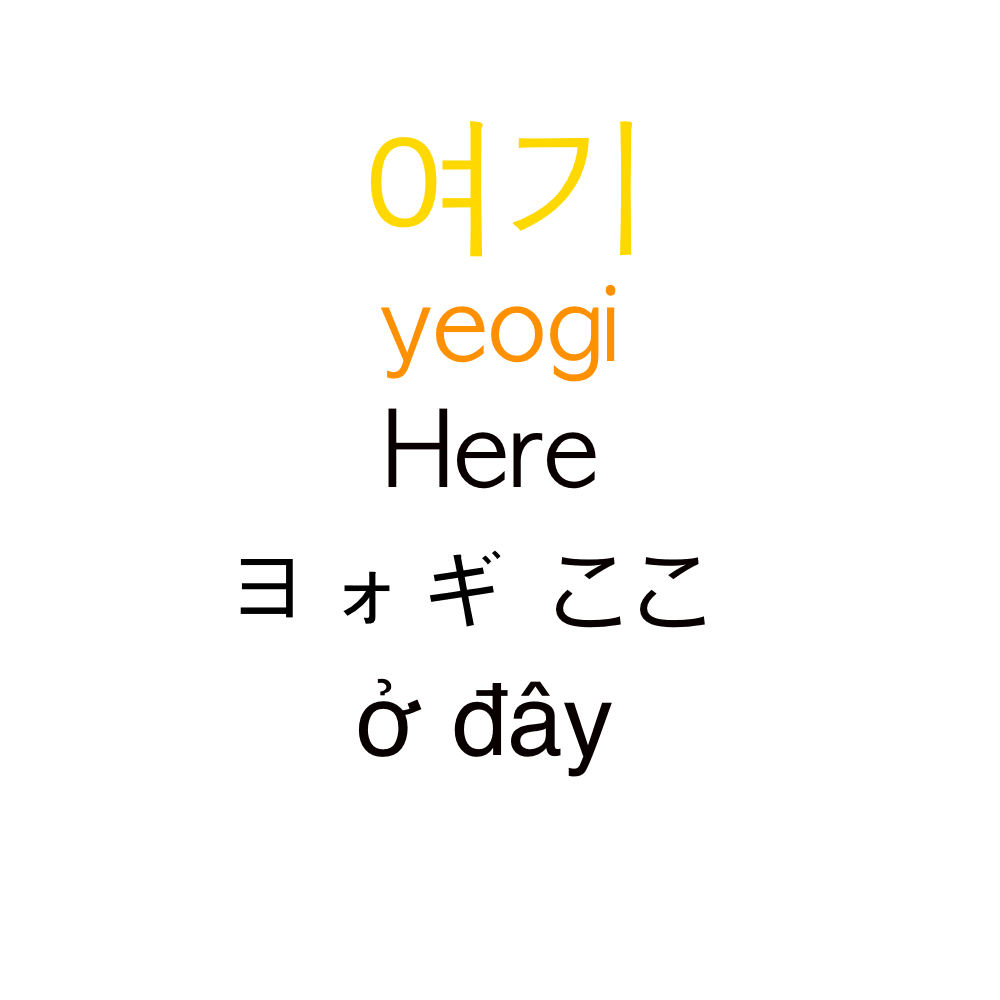
<style>
.page{position:relative;width:1000px;height:1000px;background:#ffffff}
.page>*{position:absolute;margin:0}
.t1{font:150px "AppleGothic";color:#ffd800}
.t2{font:100px "AppleGothic";color:#ff9000}
.t3{font:100px "AppleGothic";color:#080000}
.t4{font:100px "AppleGothic";color:#000000}
.t5{font:100px "HiraKakuProN-W3";color:#080000}
.t6{font:100px "Helvetica";color:#080000}
</style>
<div class="page">
<p class="t1" style="left:370px;top:121px;width:263px;height:136px">여기</p>
<p class="t2" style="left:380px;top:284px;width:236px;height:98px">yeogi</p>
<p class="t3" style="left:388px;top:408px;width:208px;height:81px">Here</p>
<p class="t4" style="left:240px;top:550px;width:261px;height:77px">ヨォギ</p>
<p class="t5" style="left:556px;top:557px;width:149px;height:71px">ここ</p>
<p class="t6" style="left:358px;top:678px;width:254px;height:99px">ở đây</p>
</div>
